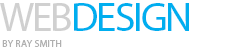
<style>
.page{position:relative;width:230px;height:48px;background:#ffffff}
.page>*{position:absolute;margin:0}
.t1{font:40.6px "MyriadPro-Regular";letter-spacing:-0.05em;color:#00aeef;text-transform:uppercase}
.t2{font:40.6px "MyriadPro-Regular";letter-spacing:-0.05em;color:#d0d0d0;text-transform:uppercase}
.t3{font:10px "MyriadPro-Regular";letter-spacing:0.02em;color:#b0b0b0;text-transform:uppercase}
</style>
<div class="page">
<p class="t1" style="left:0px;top:3px;width:189px;height:28px"><span class="t2">web</span>Design</p>
<p class="t3" style="left:2px;top:40px;width:60px;height:7px">by Ray Smith</p>
</div>
